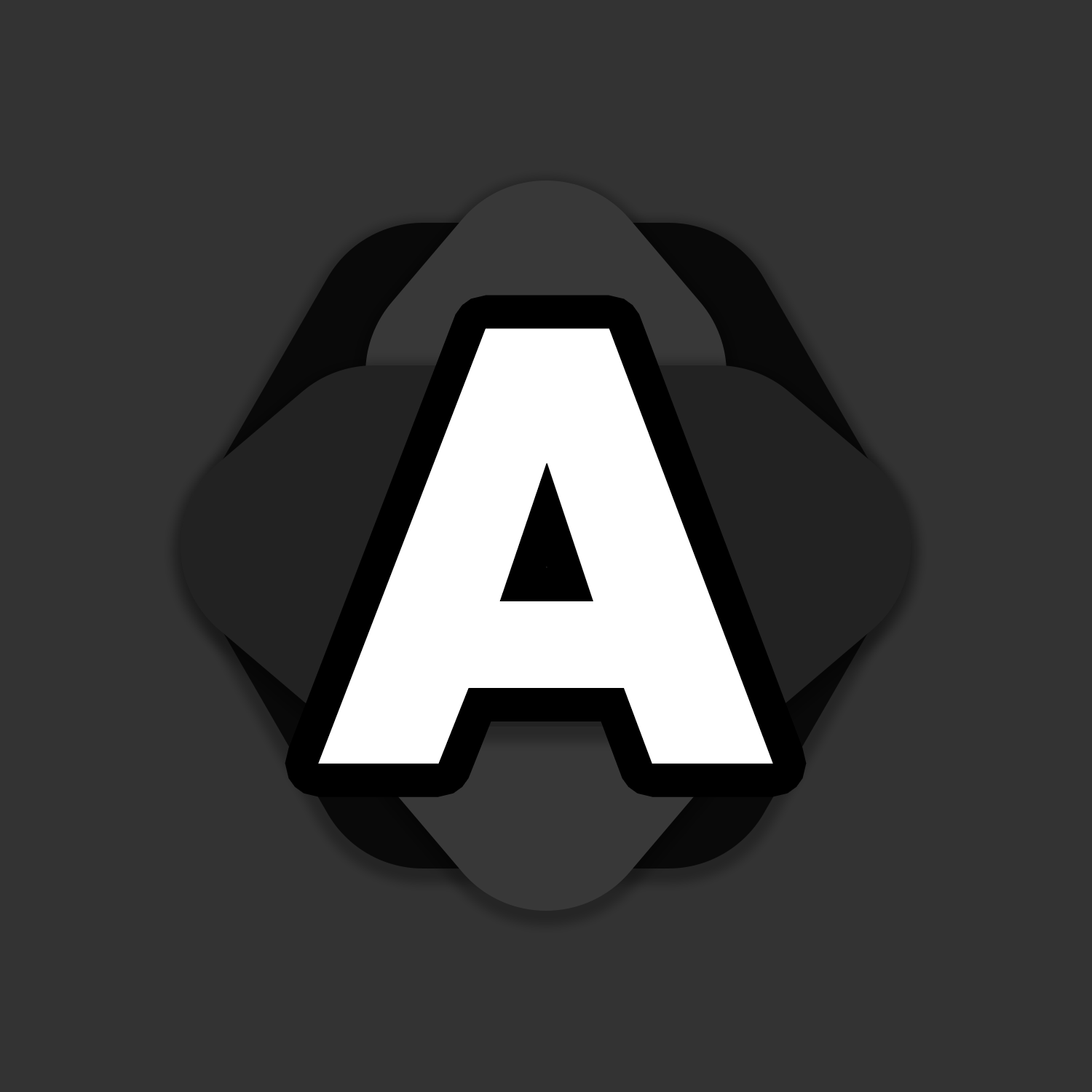
<style>
.page{position:relative;width:1092px;height:1092px;background:#333333}
.page>*{position:absolute;margin:0}
.t1{font:576.3px "Futura-Bold";color:#ffffff}
</style>
<div class="page">
<p class="t1" style="left:318px;top:328px;width:455px;height:436px">A</p>
</div>
